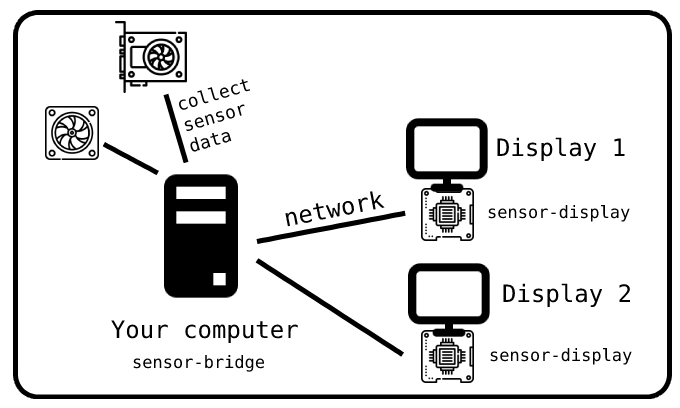
<style>
.page{position:relative;width:680px;height:408px;background:#ffffff}
.page>*{position:absolute;margin:0}
.t1{font:18px "DejaVuSansMono";color:#000000}
.t2{font:24px "DejaVuSansMono";color:#000000}
.t3{font:17px "DejaVuSansMono";color:#000000}
</style>
<div class="page">
<p class="t1" style="left:178px;top:79px;width:73px;height:73px;rotate:-16deg">collect<br>sensor<br>data</p>
<p class="t2" style="left:497px;top:137px;width:128px;height:24px">Display 1</p>
<p class="t2" style="left:285px;top:191px;width:100px;height:36px;rotate:-11deg">network</p>
<p class="t3" style="left:488px;top:204px;width:142px;height:18px">sensor-display</p>
<p class="t2" style="left:503px;top:283px;width:128px;height:24px">Display 2</p>
<p class="t2" style="left:111px;top:320px;width:187px;height:23px">Your computer</p>
<p class="t3" style="left:490px;top:347px;width:142px;height:18px">sensor-display</p>
<p class="t3" style="left:133px;top:355px;width:132px;height:17px">sensor-bridge</p>
</div>
